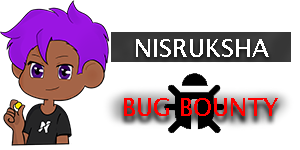
<style>
.page{position:relative;width:300px;height:150px;background:#ffffff}
.page>*{position:absolute;margin:0}
.t1{font:25px "LucidaSansUnicode";color:#ffffff;text-transform:uppercase}
.t2{font:25px "LucidaSansUnicode";color:#ff0000;text-transform:uppercase}
</style>
<div class="page">
<p class="t1" style="left:136px;top:39px;width:133px;height:18px">nisruksha</p>
<p class="t2" style="left:124px;top:98px;width:154px;height:18px">bug bounty</p>
</div>
